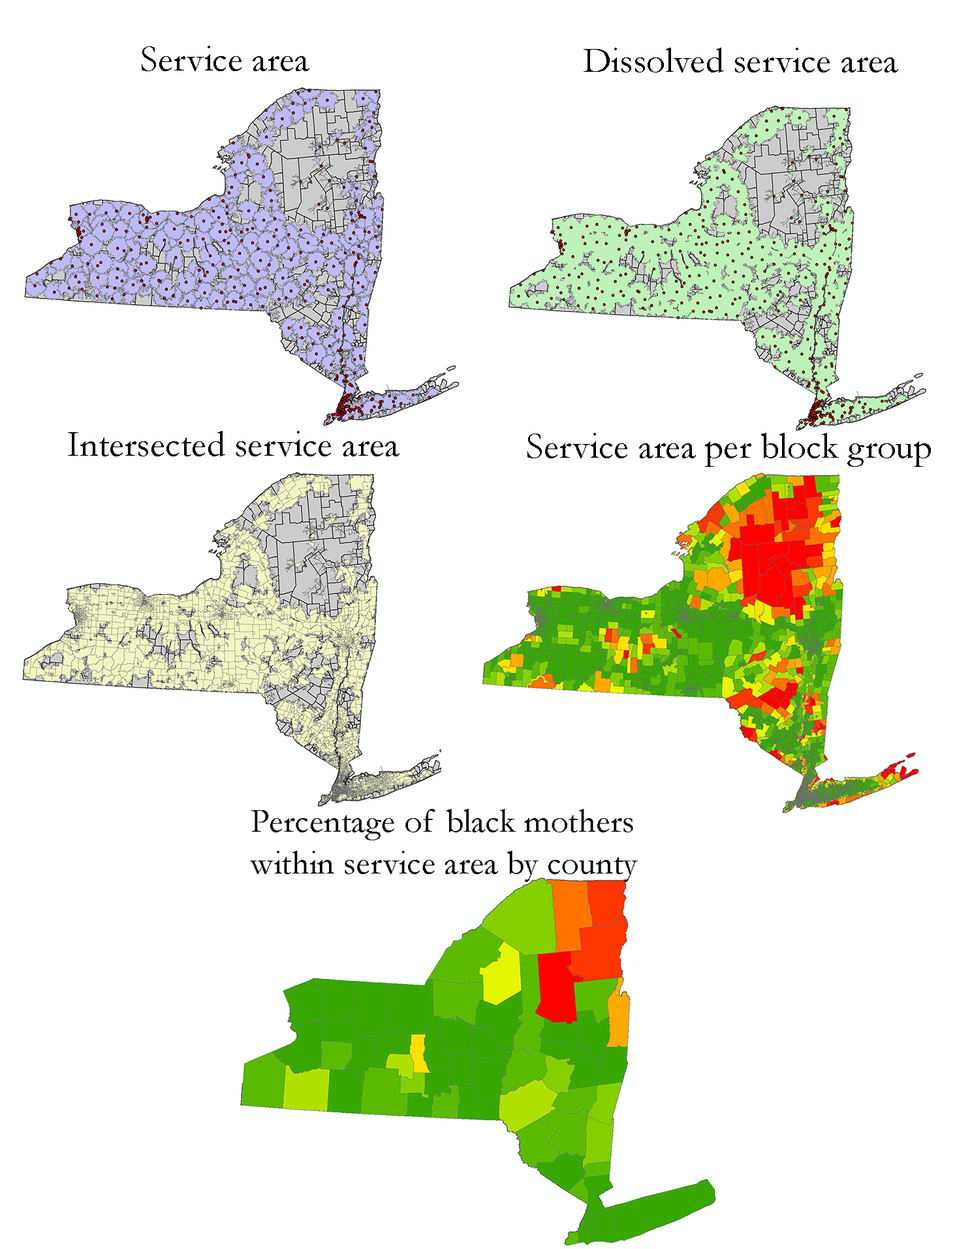
<style>
.page{position:relative;width:955px;height:1249px;background:#feffff}
.page>*{position:absolute;margin:0}
.t1{font:36.9px "Garamond";color:#000000}
.t2{font:36.7px "Garamond";color:#000000}
</style>
<div class="page">
<p class="t1" style="left:142px;top:46px;width:167px;height:25px">Service area</p>
<p class="t2" style="left:584px;top:48px;width:314px;height:24px">Dissolved service area</p>
<p class="t1" style="left:68px;top:431px;width:331px;height:25px">Intersected service area</p>
<p class="t1" style="left:527px;top:433px;width:404px;height:34px">Service area per block group</p>
</div>
